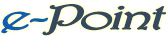
<style>
.page{position:relative;width:166px;height:37px;background:#ffffff}
.page>*{position:absolute;margin:0}
.t1{font:35px "Harrington";color:#34495e;font-weight:bold;font-style:italic;scale:1.67 1}
.t2{font:35px "Harrington";color:#105fae;font-weight:bold;font-style:italic;scale:1.67 1}
</style>
<div class="page">
<p class="t1" style="left:1px;top:4px;width:166px;height:32px"><span class="t2">e-</span>Point</p>
</div>
